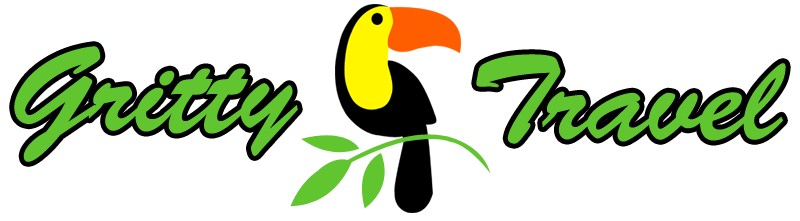
<style>
.page{position:relative;width:800px;height:221px;background:#ffffff}
.page>*{position:absolute;margin:0}
.t1{font:121.2px "BrushScriptStd";color:#61c52f}
</style>
<div class="page">
<p class="t1" style="left:14px;top:46px;width:284px;height:116px">Gritty</p>
<p class="t1" style="left:476px;top:54px;width:310px;height:90px">Travel</p>
</div>
